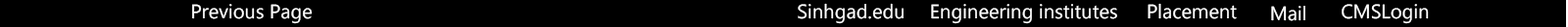
<style>
.page{position:relative;width:1568px;height:27px;background:#000000}
.page>*{position:absolute;margin:0}
.t1{font:19.8px "MicrosoftNewTaiLue";color:#ffffff}
</style>
<div class="page">
<p class="t1" style="left:192px;top:4px;width:121px;height:20px">Previous Page</p>
<p class="t1" style="left:798px;top:3px;width:106px;height:21px">Sinhgad.edu</p>
<p class="t1" style="left:931px;top:4px;width:186px;height:20px">Engineering institutes</p>
<p class="t1" style="left:1148px;top:3px;width:89px;height:17px">Placement</p>
<p class="t1" style="left:1271px;top:6px;width:34px;height:16px">Mail</p>
<p class="t1" style="left:1342px;top:4px;width:87px;height:20px">CMSLogin</p>
</div>
